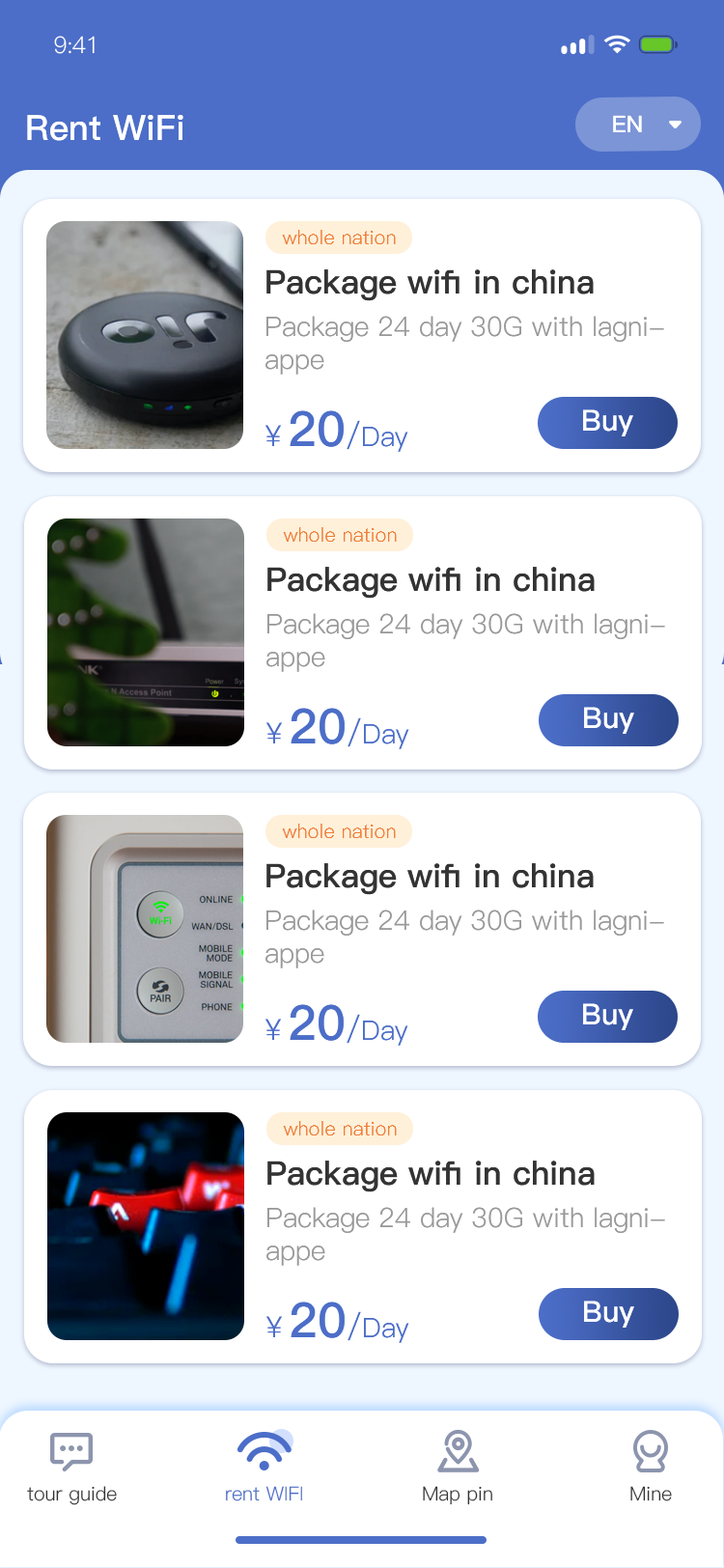
<style>
.page{position:relative;width:724px;height:1568px;background:#ffffff}
.page>*{position:absolute;margin:0}
.t1{font:23.2px "PingFang-SC-Regular";letter-spacing:-0.025em;color:#ffffff}
.t2{font:34.8px "PingFang-SC-Bold";color:#ffffff}
.t3{font:23.2px "PingFang-SC-Bold";color:#ffffff}
.t4{font:19.3px "PingFang-SC-Regular";color:#ee7d39}
.t5{font:32.8px "PingFang-SC-Bold";color:#333333}
.t6{font:32.8px "PingFang-SC-Bold";color:#333333;text-transform:uppercase}
.t7{font:27px "PingFang-SC-Regular";color:#999999}
.t8{font:27px "PingFang-SC-Regular";color:#4c6ec8}
.t9{font:29px "PingFang-SC-Regular";color:#4c6ec8}
.t10{font:48.3px "PingFang-SC-Bold";color:#4c6ec8}
.t11{font:30.9px "PingFang-SC-Regular";color:#4c6ec8}
.t12{font:29px "PingFang-SC-Bold";color:#ffffff}
.t13{font:19.3px "PingFang-SC-Regular";color:#333333}
.t14{font:19.3px "PingFang-SC-Regular";color:#4c6ec8}
</style>
<div class="page">
<p class="t1" style="left:54px;top:36px;width:41px;height:18px">9:41</p>
<p class="t2" style="left:27px;top:115px;width:156px;height:26px">Rent WiFi</p>
<p class="t3" style="left:613px;top:115px;width:29px;height:17px">EN</p>
<p class="t4" style="left:282px;top:230px;width:114px;height:14px">whole nation</p>
<p class="t5" style="left:266px;top:269px;width:328px;height:32px"><span class="t6">p</span>ackage wifi in china</p>
<p class="t7" style="left:266px;top:316px;width:398px;height:59px">Package 24 day 30G with lagni-<br>appe</p>
<p class="t8" style="left:266px;top:410px;width:142px;height:42px"><span class="t9">￥</span><span class="t10">20</span><span class="t11">/</span>Day</p>
<p class="t12" style="left:583px;top:409px;width:50px;height:27px">Buy</p>
<p class="t4" style="left:283px;top:527px;width:114px;height:15px">whole nation</p>
<p class="t5" style="left:267px;top:567px;width:328px;height:32px"><span class="t6">p</span>ackage wifi in china</p>
<p class="t7" style="left:266px;top:613px;width:399px;height:59px">Package 24 day 30G with lagni-<br>appe</p>
<p class="t8" style="left:266px;top:708px;width:143px;height:41px"><span class="t9">￥</span><span class="t10">20</span><span class="t11">/</span>Day</p>
<p class="t12" style="left:584px;top:707px;width:50px;height:27px">Buy</p>
<p class="t4" style="left:282px;top:824px;width:114px;height:14px">whole nation</p>
<p class="t5" style="left:266px;top:863px;width:328px;height:32px"><span class="t6">p</span>ackage wifi in china</p>
<p class="t7" style="left:266px;top:910px;width:398px;height:58px">Package 24 day 30G with lagni-<br>appe</p>
<p class="t8" style="left:266px;top:1004px;width:142px;height:42px"><span class="t9">￥</span><span class="t10">20</span><span class="t11">/</span>Day</p>
<p class="t12" style="left:583px;top:1003px;width:50px;height:27px">Buy</p>
<p class="t4" style="left:283px;top:1121px;width:114px;height:14px">whole nation</p>
<p class="t5" style="left:267px;top:1161px;width:328px;height:31px"><span class="t6">p</span>ackage wifi in china</p>
<p class="t7" style="left:266px;top:1207px;width:399px;height:59px">Package 24 day 30G with lagni-<br>appe</p>
<p class="t8" style="left:266px;top:1302px;width:143px;height:41px"><span class="t9">￥</span><span class="t10">20</span><span class="t11">/</span>Day</p>
<p class="t12" style="left:584px;top:1301px;width:50px;height:27px">Buy</p>
<p class="t13" style="left:27px;top:1486px;width:90px;height:19px">tour guide</p>
<p class="t14" style="left:226px;top:1486px;width:76px;height:15px">rent WIFI</p>
<p class="t13" style="left:423px;top:1486px;width:69px;height:19px">Map pin</p>
<p class="t13" style="left:630px;top:1486px;width:42px;height:15px">Mine</p>
</div>
